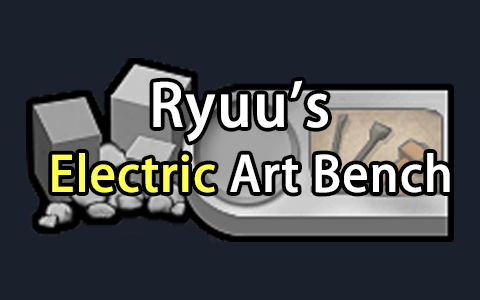
<style>
.page{position:relative;width:480px;height:300px;background:#1a202c}
.page>*{position:absolute;margin:0}
.t1{font:58px "AdobeHeitiStd-Regular";color:#ffffff;font-weight:bold}
.t2{font:48px "AdobeHeitiStd-Regular";color:#ffffff;font-weight:bold}
.t3{font:48px "AdobeHeitiStd-Regular";color:#ffff4d;font-weight:bold}
</style>
<div class="page">
<p class="t1" style="left:153px;top:80px;width:175px;height:62px">Ryuu's</p>
<p class="t2" style="left:52px;top:153px;width:398px;height:40px"><span class="t3">Electric</span> Art Bench</p>
</div>
